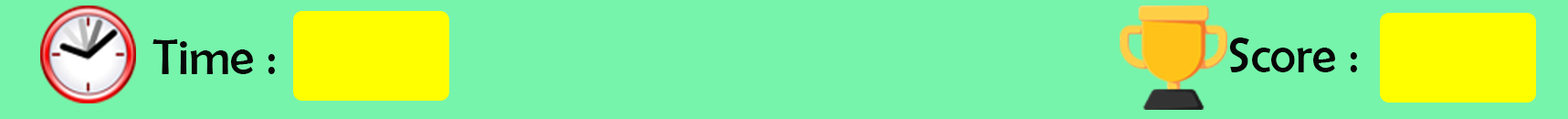
<style>
.page{position:relative;width:1568px;height:119px;background:#76f4ab}
.page>*{position:absolute;margin:0}
.t1{font:49.8px "BerlinSansFB-Reg";color:#070707}
</style>
<div class="page">
<p class="t1" style="left:153px;top:39px;width:122px;height:35px">Time :</p>
<p class="t1" style="left:1229px;top:37px;width:128px;height:35px">Score :</p>
</div>
